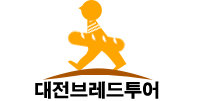
<style>
.page{position:relative;width:200px;height:101px;background:#ffffff}
.page>*{position:absolute;margin:0}
.t1{font:18px "H2gtrE";letter-spacing:0.001em;color:#000000}
</style>
<div class="page">
<p class="t1" style="left:35px;top:81px;width:124px;height:18px">대전브레드투어</p>
</div>
